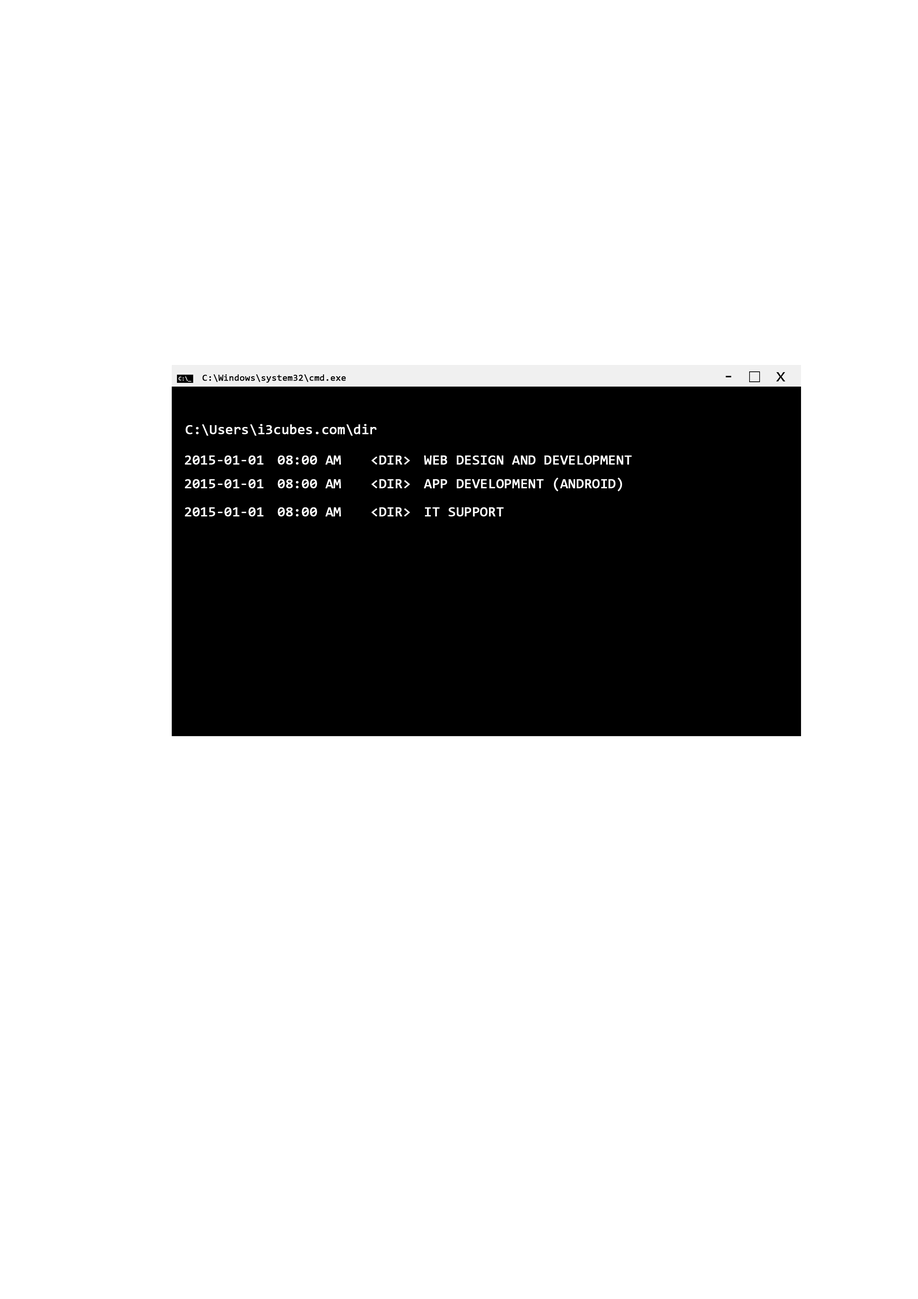
<style>
.page{position:relative;width:918px;height:1299px;background:#ffffff}
.page>*{position:absolute;margin:0}
.t1{font:5.5px "Consolas";color:#ffffff;font-weight:bold}
.t2{font:9.3px "Consolas";color:#000000;font-weight:bold}
.t3{font:19px "Consolas";color:#000000}
.t4{font:13.9px "Consolas";color:#ffffff;font-weight:bold}
</style>
<div class="page">
<p class="t1" style="left:178px;top:376px;width:13px;height:6px">C:\_</p>
<p class="t2" style="left:203px;top:374px;width:143px;height:9px">C:\Windows\system32\cmd.exe</p>
<p class="t3" style="left:726px;top:376px;width:6px;height:1px">-</p>
<p class="t3" style="left:776px;top:372px;width:10px;height:9px">x</p>
<p class="t4" style="left:185px;top:424px;width:192px;height:12px">C:\Users\i3cubes.com\dir</p>
<p class="t4" style="left:185px;top:455px;width:447px;height:10px">2015-01-01 08:00 AM   &lt;DIR&gt; WEB DESIGN AND DEVELOPMENT</p>
<p class="t4" style="left:185px;top:478px;width:437px;height:13px">2015-01-01 08:00 AM   &lt;DIR&gt; APP DEVELOPMENT (ANDROID)</p>
<p class="t4" style="left:185px;top:507px;width:319px;height:9px">2015-01-01 08:00 AM   &lt;DIR&gt; IT SUPPORT</p>
</div>
